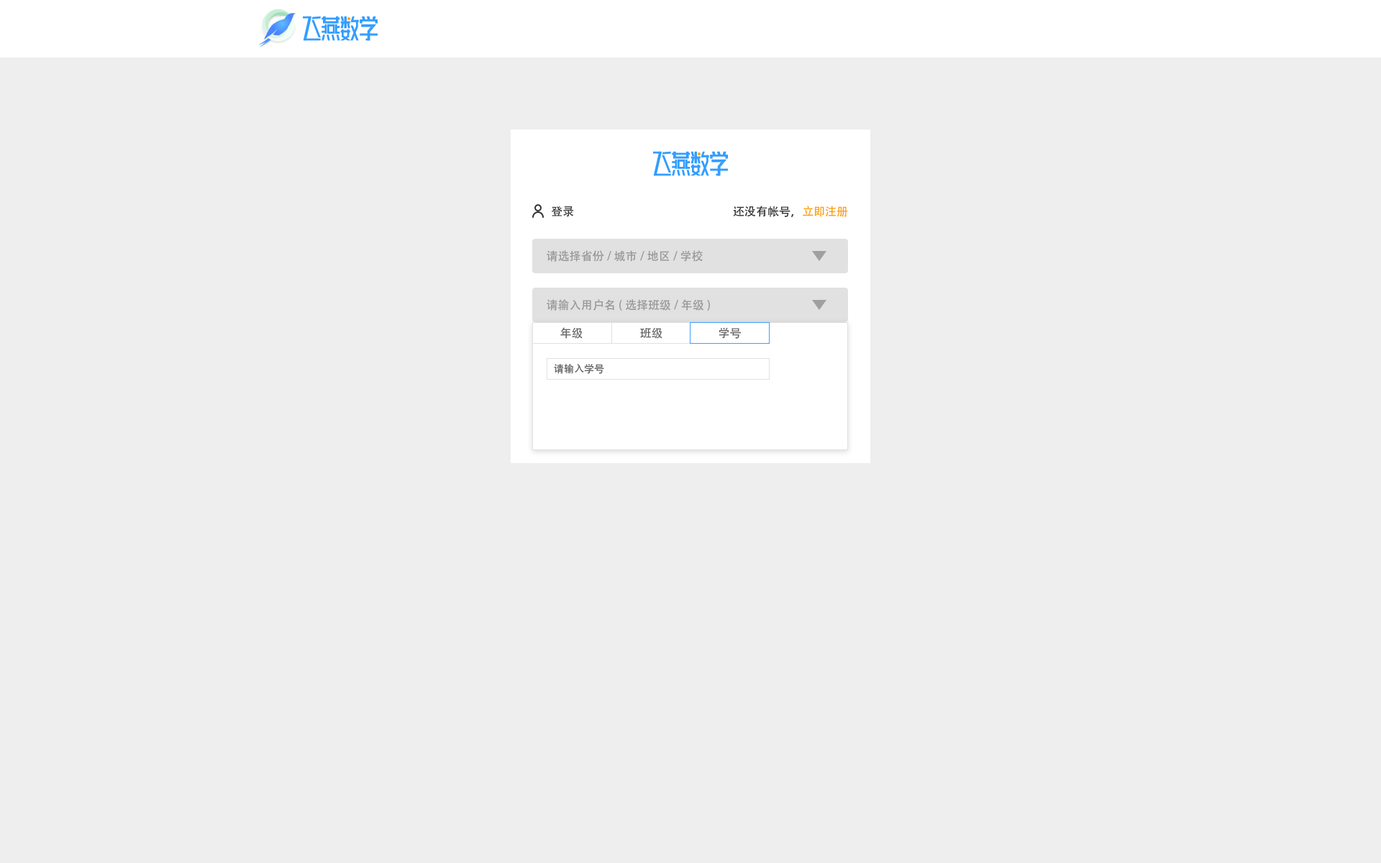
<style>
.page{position:relative;width:1381px;height:863px;background:#eeeeee}
.page>*{position:absolute;margin:0}
.t1{font:11.5px "AdobeHeitiStd-Regular";color:#333333}
.t2{font:11.5px "AdobeHeitiStd-Regular";color:#ffa200}
.t3{font:11.5px "AdobeHeitiStd-Regular";color:#999999}
.t4{font:11.5px "AdobeHeitiStd-Regular";color:#666666}
.t5{font:10.1px "AdobeHeitiStd-Regular";color:#666666}
</style>
<div class="page">
<p class="t1" style="left:551px;top:206px;width:23px;height:11px">登录</p>
<p class="t1" style="left:733px;top:206px;width:115px;height:11px">还没有帐号，<span class="t2">立即注册</span></p>
<p class="t3" style="left:547px;top:250px;width:156px;height:12px">请选择省份/城市/地区/学校</p>
<p class="t3" style="left:547px;top:299px;width:163px;height:12px">请输入用户名(选择班级/年级)</p>
<p class="t4" style="left:560px;top:327px;width:23px;height:12px">年级</p>
<p class="t4" style="left:640px;top:327px;width:23px;height:12px">班级</p>
<p class="t4" style="left:719px;top:327px;width:22px;height:12px">学号</p>
<p class="t5" style="left:554px;top:364px;width:50px;height:10px">请输入学号</p>
</div>
